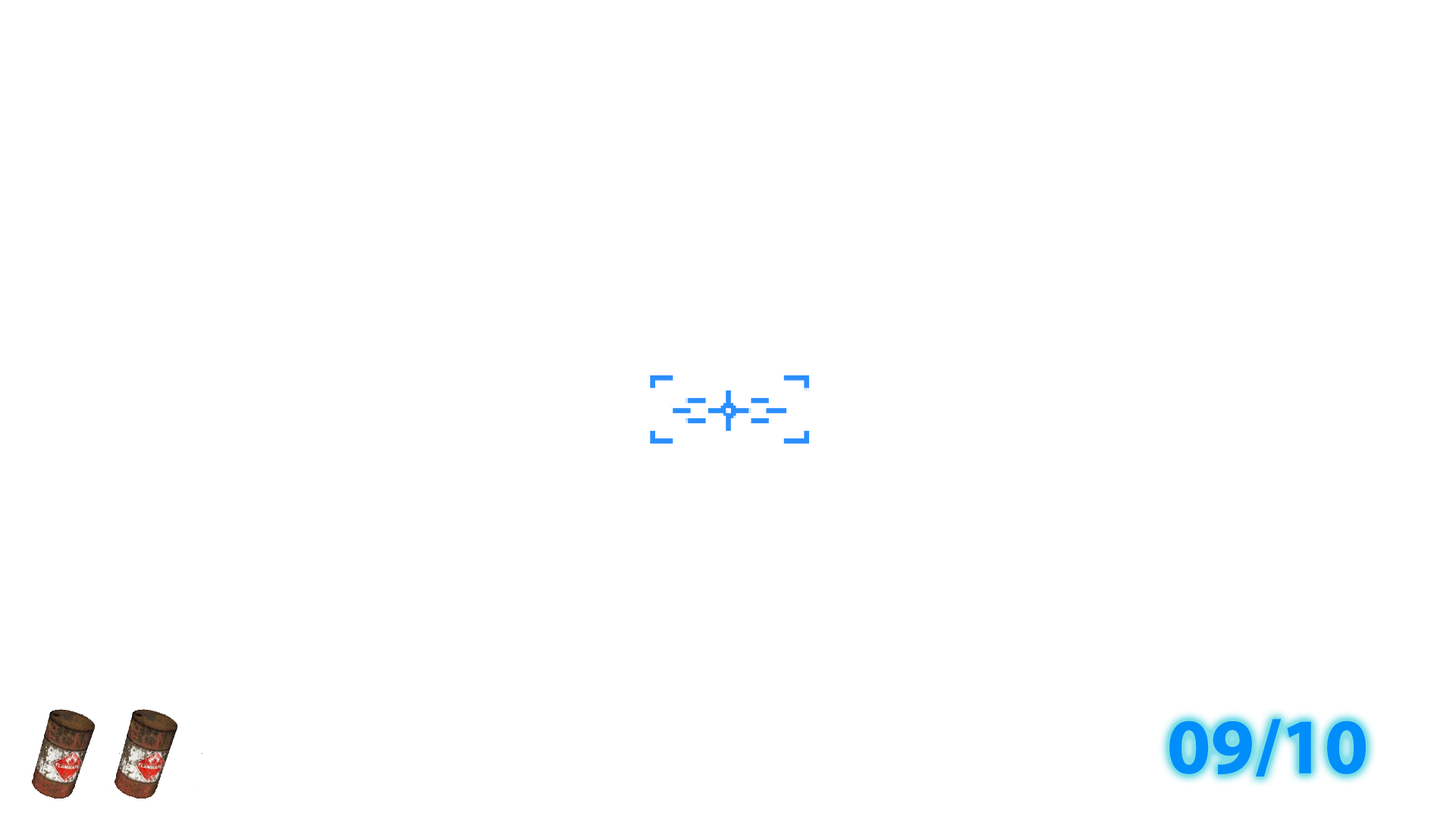
<style>
.page{position:relative;width:1456px;height:819px;background:#ffffff}
.page>*{position:absolute;margin:0}
.t1{font:79px "MyriadPro-Bold";color:#028efa}
</style>
<div class="page">
<p class="t1" style="left:1169px;top:719px;width:197px;height:58px">09/10</p>
</div>
